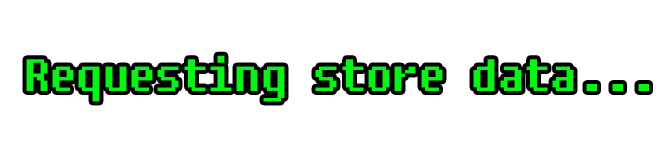
<style>
.page{position:relative;width:670px;height:144px;background:#ffffff}
.page>*{position:absolute;margin:0}
.t1{font:45px "Fixedsys";letter-spacing:-0.04em;color:#09f319}
</style>
<div class="page">
<p class="t1" style="left:26px;top:55px;width:623px;height:47px">Requesting store data...</p>
</div>
